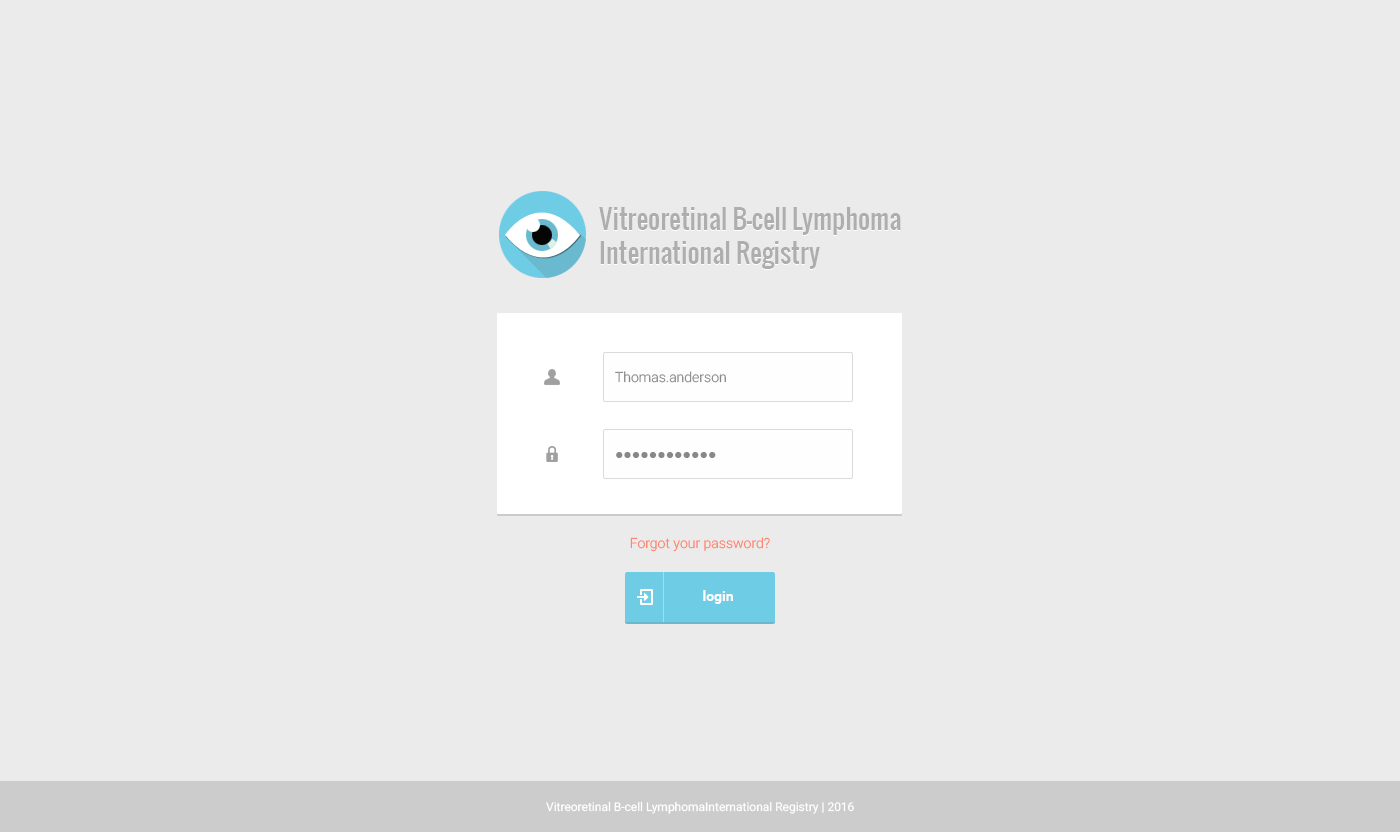
<style>
.page{position:relative;width:1400px;height:832px;background:#ebebeb}
.page>*{position:absolute;margin:0}
.t1{font:26px/34px "Oswald-Regular";color:#aeaeae}
.t2{font:14px "Roboto-Light";color:#888888}
.t3{font:14px "TimesNewRomanPSMT";color:#888888}
.t4{font:14px "Roboto-Light";color:#fd7f68}
.t5{font:14px "Roboto-Bold";color:#ffffff}
.t6{font:12px "Roboto-Regular";color:#ffffff}
</style>
<div class="page">
<p class="t1" style="left:599px;top:208px;width:302px;height:62px">Vitreoretinal B-cell Lymphoma<br>International Registry</p>
<p class="t1" style="left:599px;top:207px;width:302px;height:62px">Vitreoretinal B-cell Lymphoma<br>International Registry</p>
<p class="t2" style="left:615px;top:371px;width:111px;height:12px">Thomas.anderson</p>
<p class="t3" style="left:616px;top:452px;width:100px;height:6px">●●●●●●●●●●●●</p>
<p class="t4" style="left:630px;top:537px;width:140px;height:15px">Forgot your password?</p>
<p class="t5" style="left:703px;top:590px;width:30px;height:14px">login</p>
<p class="t6" style="left:546px;top:801px;width:308px;height:13px">Vitreoretinal B-cell LymphomaInternational Registry | 2016</p>
</div>
